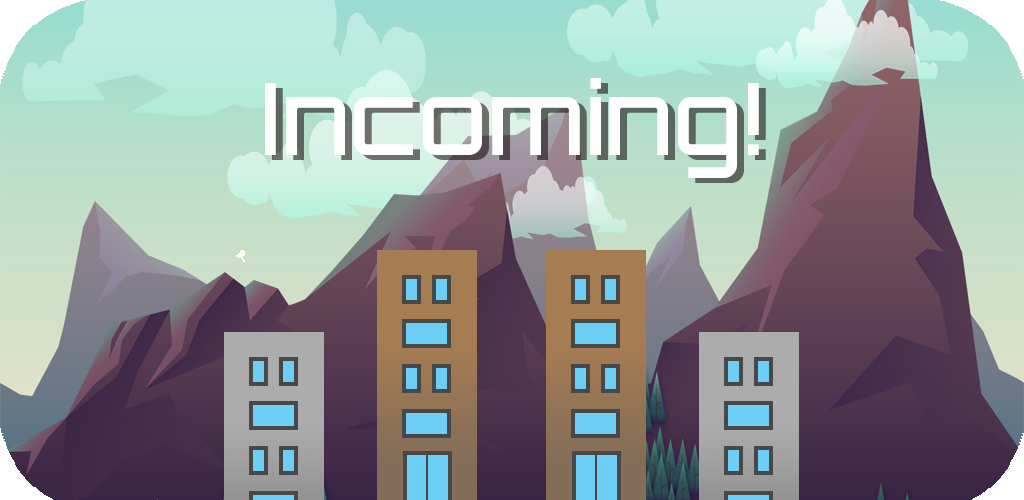
<style>
.page{position:relative;width:1024px;height:500px}
.page>*{position:absolute;margin:0}
.t1{font:100px "Orbitron-Medium";color:#ffffff}
</style>
<div class="page">
<p class="t1" style="left:265px;top:78px;width:494px;height:100px">Incoming!</p>
</div>
